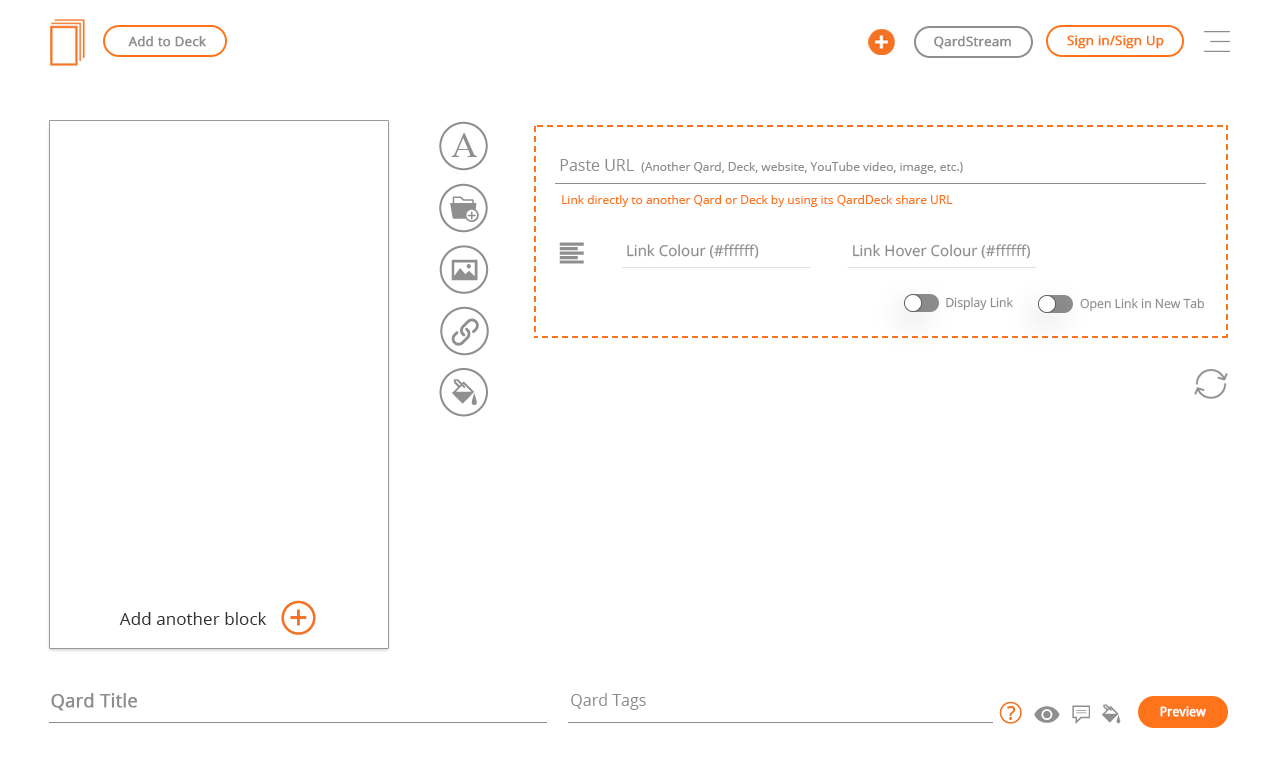
<style>
.page{position:relative;width:1280px;height:768px;background:#ffffff}
.page>*{position:absolute;margin:0}
.t1{font:13px "OpenSans";color:#8d8d8d;font-weight:bold}
.t2{font:13px "OpenSans";color:#ff741b;font-weight:bold}
.t3{font:12px "OpenSans";color:#8d8d8d}
.t4{font:16px "OpenSans";color:#8d8d8d}
.t5{font:12px "OpenSans";color:#ff741b}
.t6{font:14.9px "OpenSans";color:#8d8d8d}
.t7{font:12.4px "OpenSans";color:#8d8d8d}
.t8{font:17.1px "OpenSans";color:#323232}
.t9{font:18px "OpenSans";color:#8d8d8d;font-weight:bold}
.t10{font:13px "OpenSans";color:#ffffff;font-weight:bold;scale:0.93 1}
</style>
<div class="page">
<p class="t1" style="left:128px;top:35px;width:78px;height:12px">Add to Deck</p>
<p class="t1" style="left:934px;top:35px;width:77px;height:14px">QardStream</p>
<p class="t2" style="left:1067px;top:35px;width:97px;height:14px">Sign in/Sign Up</p>
<p class="t3" style="left:560px;top:159px;width:403px;height:15px"><span class="t4">Paste URL  </span>(Another Qard, Deck, website, YouTube video, image, etc.)</p>
<p class="t5" style="left:562px;top:195px;width:391px;height:12px">Link directly to another Qard or Deck by using its QardDeck share URL</p>
<p class="t6" style="left:627px;top:244px;width:132px;height:15px">Link Colour (#ffffff)</p>
<p class="t6" style="left:853px;top:244px;width:177px;height:15px">Link Hover Colour (#ffffff)</p>
<p class="t7" style="left:946px;top:297px;width:67px;height:14px">Display Link</p>
<p class="t7" style="left:1080px;top:298px;width:124px;height:14px">Open Link in New Tab</p>
<p class="t8" style="left:119px;top:612px;width:148px;height:13px">Add another block</p>
<p class="t9" style="left:51px;top:693px;width:86px;height:18px">Qard Title</p>
<p class="t4" style="left:571px;top:693px;width:75px;height:17px">Qard Tags</p>
<p class="t10" style="left:1160px;top:706px;width:46px;height:11px">Preview</p>
</div>
